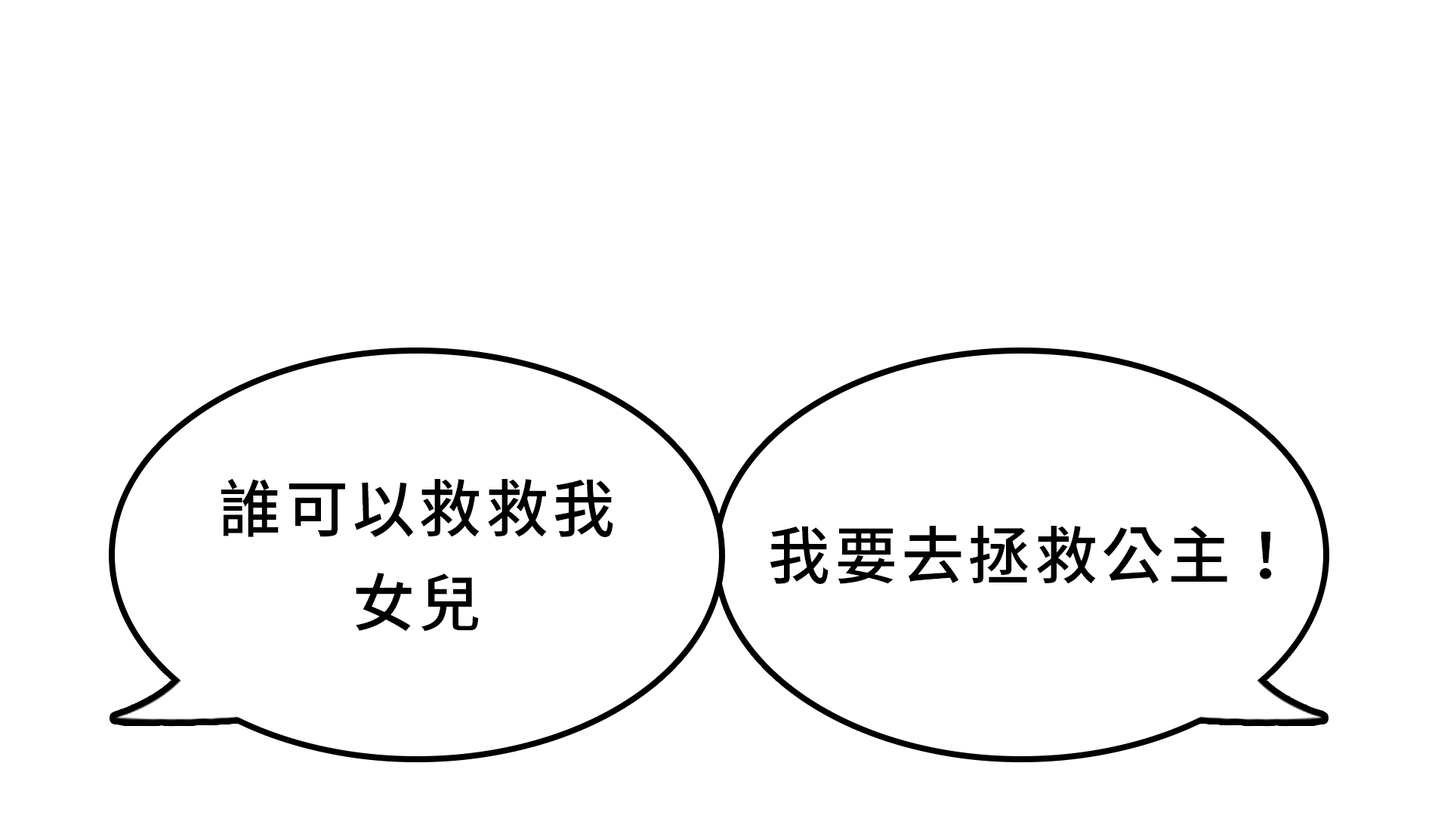
<style>
.page{position:relative;width:1435px;height:831px;background:#ffffff}
.page>*{position:absolute;margin:0}
.t1{font:62.9px/94.4px "NotoSansCJKtc-Medium";letter-spacing:0.06em;color:#000000}
.t2{font:62.9px "NotoSansCJKtc-Medium";letter-spacing:0.06em;color:#000000}
</style>
<div class="page">
<p class="t1" style="left:221px;top:478px;width:392px;height:153px;text-align:center">誰可以救救我<br>女兒</p>
<p class="t2" style="left:770px;top:526px;width:502px;height:58px">我要去拯救公主！</p>
</div>
